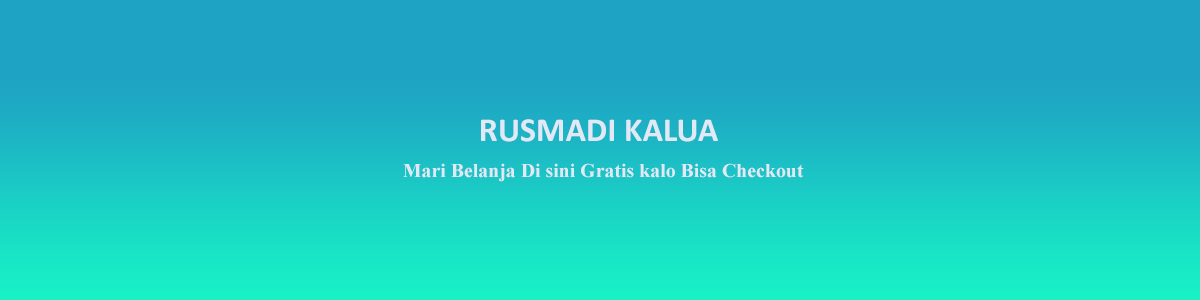
<style>
.page{position:relative;width:1200px;height:300px;background:#1ea3c4}
.page>*{position:absolute;margin:0}
.t1{font:33.8px "Calibri-Bold";color:#e1e8f6}
.t2{font:19.8px "TimesNewRomanPS-BoldMT";color:#e1e8f6}
</style>
<div class="page">
<p class="t1" style="left:481px;top:119px;width:237px;height:23px">RUSMADI KALUA</p>
<p class="t2" style="left:403px;top:163px;width:401px;height:19px">Mari Belanja Di sini Gratis kalo Bisa Checkout</p>
</div>
